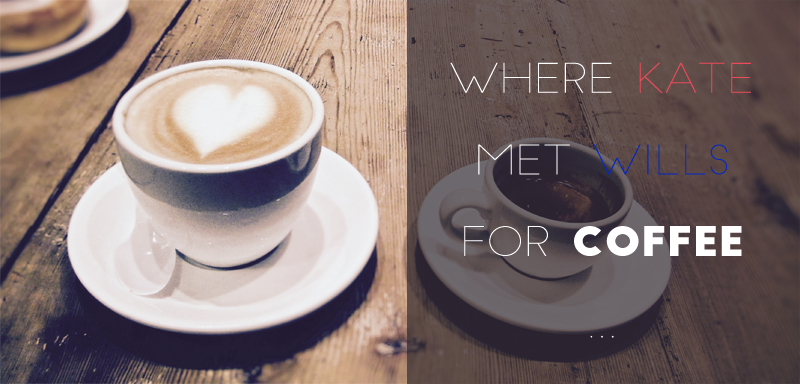
<style>
.page{position:relative;width:800px;height:384px}
.page>*{position:absolute;margin:0}
.t1{font:68px "SlimJoe";letter-spacing:0.005em;color:#ffffff;scale:1.06 1}
.t2{font:68px "SlimJoe";letter-spacing:0.005em;color:#eb4a59;scale:1.06 1}
.t3{font:68px "SlimJoe";letter-spacing:0.005em;color:#0128c5;scale:1.06 1}
.t4{font:68px "BigJohn";letter-spacing:0.005em;color:#ffffff;scale:1.06 1}
</style>
<div class="page">
<p class="t1" style="left:450px;top:62px;width:301px;height:276px;text-align:center">WHere <span class="t2">Kate </span>met <span class="t3">Wills<br></span>for <span class="t4">coffee<br></span>...<br>...</p>
</div>
